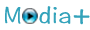
<style>
.page{position:relative;width:90px;height:30px;background:#ffffff}
.page>*{position:absolute;margin:0}
.t1{font:25px "HannotateSC-W5";color:#33a3bb}
.t2{font:33.3px "HannotateSC-W5";color:#33a3bb}
</style>
<div class="page">
<p class="t1" style="left:5px;top:6px;width:85px;height:19px">M  dia<span class="t2">+</span></p>
</div>
